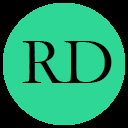
<style>
.page{position:relative;width:128px;height:128px;background:#2ed796}
.page>*{position:absolute;margin:0}
.t1{font:66.7px "Garamond";color:#000000}
</style>
<div class="page">
<p class="t1" style="left:22px;top:41px;width:90px;height:42px">RD</p>
</div>
